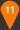
<style>
.page{position:relative;width:20px;height:30px;background:#ff7800}
.page>*{position:absolute;margin:0}
.t1{font:9px "OpenSans";color:#ffffff;font-weight:bold}
</style>
<div class="page">
<p class="t1" style="left:5px;top:6px;width:9px;height:8px">11</p>
</div>
